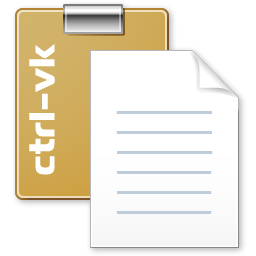
<style>
.page{position:relative;width:256px;height:256px;background:#ffffff}
.page>*{position:absolute;margin:0}
.t1{font:36px "MagistralBlackC";letter-spacing:0.04em;color:#ffffff}
</style>
<div class="page">
<p class="t1" style="left:29px;top:44px;width:26px;height:131px;rotate:-90deg">ctrl-vk</p>
</div>
